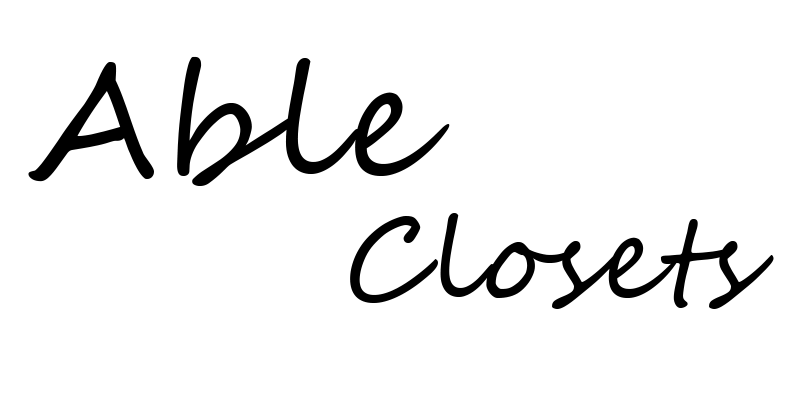
<style>
.page{position:relative;width:800px;height:400px;background:#ffffff}
.page>*{position:absolute;margin:0}
.t1{font:155.6px "SegoeScript";letter-spacing:0.025em;color:#000000}
.t2{font:112.8px "SegoeScript";letter-spacing:0.025em;color:#000000}
</style>
<div class="page">
<p class="t1" style="left:28px;top:56px;width:422px;height:130px">Able</p>
<p class="t2" style="left:350px;top:213px;width:424px;height:96px">Closets</p>
</div>
